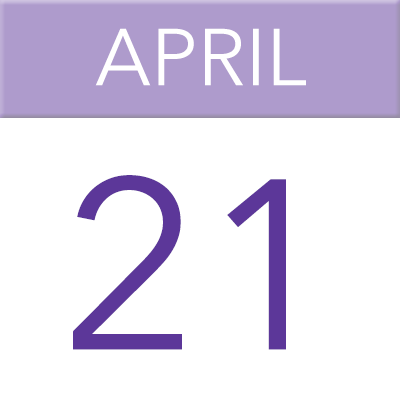
<style>
.page{position:relative;width:400px;height:400px;background:#ffffff}
.page>*{position:absolute;margin:0}
.t1{font:79.8px "AvenirNext-Regular";color:#ffffff}
.t2{font:240px "AvenirNext-Regular";color:#5c3799}
</style>
<div class="page">
<p class="t1" style="left:95px;top:28px;width:211px;height:58px">APRIL</p>
<p class="t2" style="left:73px;top:175px;width:213px;height:175px">21</p>
</div>
